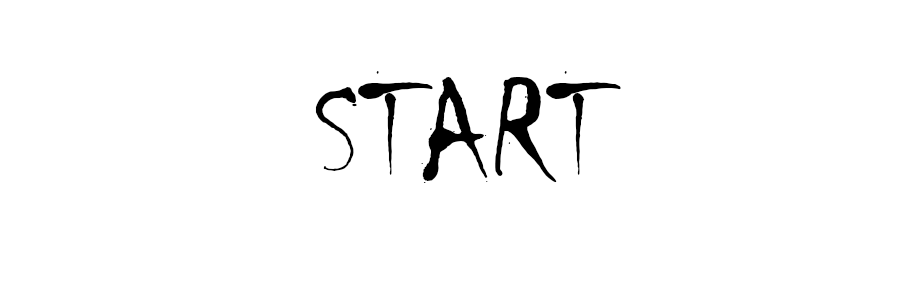
<style>
.page{position:relative;width:921px;height:285px;background:#ffffff}
.page>*{position:absolute;margin:0}
.t1{font:141.7px "Chiller-Regular";color:#000000}
</style>
<div class="page">
<p class="t1" style="left:315px;top:71px;width:306px;height:112px">START</p>
</div>
